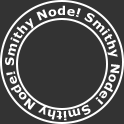
<style>
.page{position:relative;width:124px;height:124px;background:#333333}
.page>*{position:absolute;margin:0}
.t1{font:12px "Verdana-Bold";color:#ffffff;scale:1.06 1}
</style>
<div class="page">
<p class="t1" style="left:5px;top:5px;width:115px;height:116px;text-align:center">Smithy Node! Smithy Node! Smithy Node! Node!</p>
</div>
